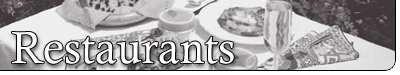
<style>
.page{position:relative;width:400px;height:75px}
.page>*{position:absolute;margin:0}
.t1{font:45px "CalistoMT";color:#ffffff}
</style>
<div class="page">
<p class="t1" style="left:12px;top:32px;width:222px;height:32px">Restaurants</p>
</div>
